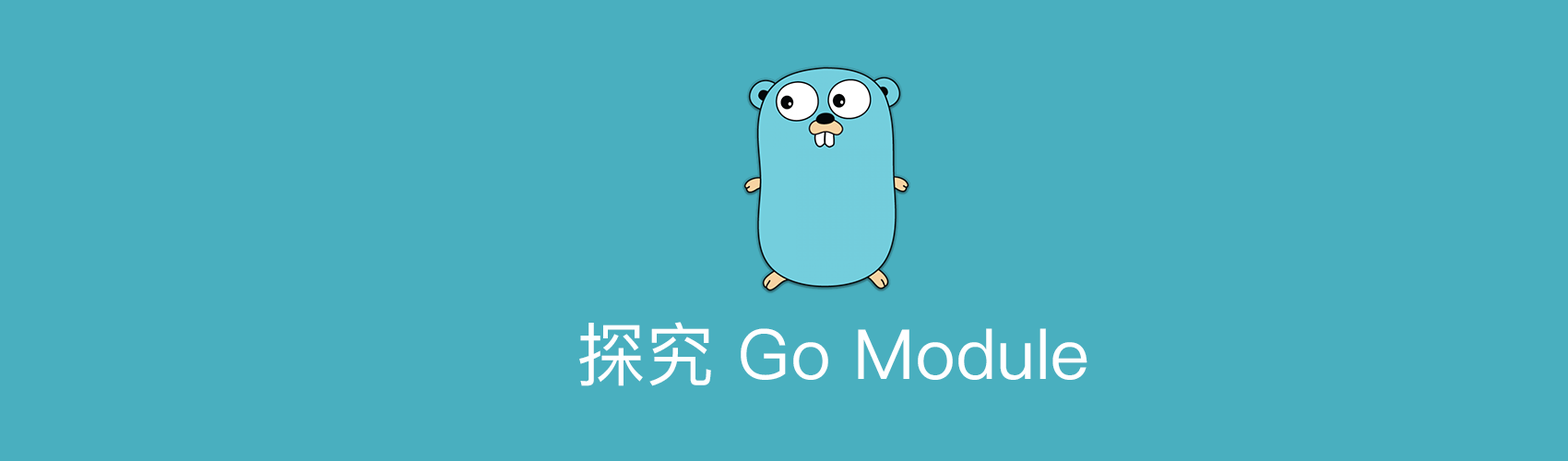
<style>
.page{position:relative;width:1568px;height:461px;background:#49afbf}
.page>*{position:absolute;margin:0}
.t1{font:69.2px "PingFangSC-Regular";color:#ffffff}
</style>
<div class="page">
<p class="t1" style="left:579px;top:322px;width:508px;height:64px">探究 Go Module</p>
</div>
